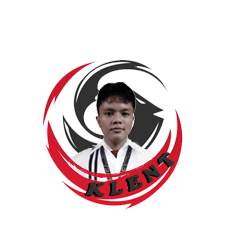
<style>
.page{position:relative;width:228px;height:230px;background:#ffffff}
.page>*{position:absolute;margin:0}
.t1{font:17.3px "CooperBlack";color:#313131}
</style>
<div class="page">
<p class="t1" style="left:86px;top:152px;width:89px;height:44px;rotate:-38deg">K L E N T</p>
</div>
